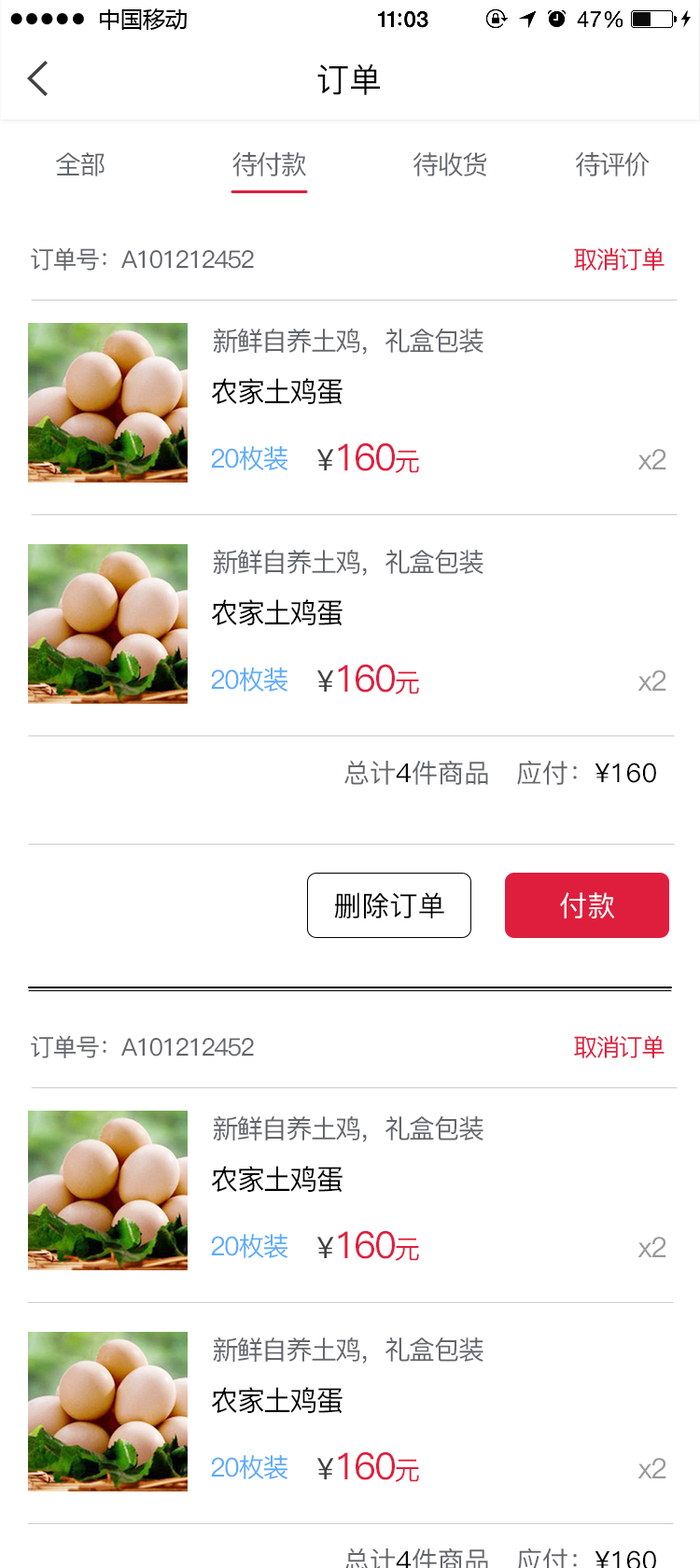
<style>
.page{position:relative;width:700px;height:1568px;background:#ffffff}
.page>*{position:absolute;margin:0}
.t1{font:33.2px "PingFang-SC-Medium";color:#000000}
.t2{font:25.8px "PingFang-SC-Medium";letter-spacing:-0.06em;color:#63666b}
.t3{font:26.1px "PingFang-SC-Medium";letter-spacing:-0.06em;color:#63666b}
.t4{font:24.3px "PingFang-SC-Medium";letter-spacing:-0.06em;color:#63666b}
.t5{font:24.3px "PingFang-SC-Medium";letter-spacing:-0.06em;color:#df1e3e}
.t6{font:28px "PingFang-SC-Medium";letter-spacing:-0.06em;color:#000000}
.t7{font:26.1px "PingFang-SC-Medium";letter-spacing:-0.06em;color:#5aabfd}
.t8{font:37.3px "PingFang-SC-Medium";letter-spacing:-0.06em;color:#df1e3e}
.t9{font:29.9px "PingFang-SC-Medium";color:#414141}
.t10{font:26.1px "PingFang-SC-Medium";letter-spacing:-0.06em;color:#df1e3e}
.t11{font:28px "PingFang-SC-Medium";letter-spacing:-0.06em;color:#999999}
.t12{font:26.1px "PingFang-SC-Medium";color:#63666b}
.t13{font:26.1px "PingFang-SC-Medium";color:#000000}
.t14{font:28px "PingFang-SC-Medium";color:#000000}
.t15{font:28px "PingFang-SC-Medium";color:#ffffff}
</style>
<div class="page">
<p class="t1" style="left:317px;top:63px;width:63px;height:32px">订单</p>
<p class="t2" style="left:56px;top:152px;width:49px;height:24px">全部</p>
<p class="t3" style="left:232px;top:152px;width:74px;height:24px">待付款</p>
<p class="t2" style="left:413px;top:152px;width:74px;height:24px">待收货</p>
<p class="t3" style="left:576px;top:152px;width:74px;height:24px">待评价</p>
<p class="t4" style="left:31px;top:247px;width:223px;height:24px">订单号：A101212452</p>
<p class="t5" style="left:574px;top:247px;width:91px;height:24px">取消订单</p>
<p class="t3" style="left:213px;top:328px;width:270px;height:27px">新鲜自养土鸡，礼盒包装</p>
<p class="t6" style="left:212px;top:378px;width:131px;height:27px">农家土鸡蛋</p>
<p class="t7" style="left:211px;top:446px;width:77px;height:24px">20枚装</p>
<p class="t8" style="left:317px;top:443px;width:102px;height:30px"><span class="t9">¥</span>160<span class="t10">元</span></p>
<p class="t11" style="left:637px;top:449px;width:29px;height:20px">x2</p>
<p class="t3" style="left:213px;top:549px;width:270px;height:27px">新鲜自养土鸡，礼盒包装</p>
<p class="t6" style="left:212px;top:599px;width:131px;height:27px">农家土鸡蛋</p>
<p class="t8" style="left:317px;top:665px;width:102px;height:29px"><span class="t9">¥</span>160<span class="t10">元</span></p>
<p class="t7" style="left:211px;top:667px;width:77px;height:25px">20枚装</p>
<p class="t11" style="left:637px;top:670px;width:29px;height:21px">x2</p>
<p class="t12" style="left:344px;top:760px;width:312px;height:25px">总计<span class="t13">4</span>件商品   应付：<span class="t13">¥160</span></p>
<p class="t14" style="left:334px;top:892px;width:110px;height:26px">删除订单</p>
<p class="t15" style="left:560px;top:892px;width:55px;height:26px">付款</p>
<p class="t4" style="left:31px;top:1035px;width:223px;height:23px">订单号：A101212452</p>
<p class="t5" style="left:574px;top:1035px;width:91px;height:23px">取消订单</p>
<p class="t3" style="left:213px;top:1115px;width:270px;height:27px">新鲜自养土鸡，礼盒包装</p>
<p class="t6" style="left:212px;top:1166px;width:131px;height:27px">农家土鸡蛋</p>
<p class="t7" style="left:211px;top:1234px;width:77px;height:24px">20枚装</p>
<p class="t8" style="left:317px;top:1231px;width:102px;height:30px"><span class="t9">¥</span>160<span class="t10">元</span></p>
<p class="t11" style="left:637px;top:1237px;width:29px;height:20px">x2</p>
<p class="t3" style="left:213px;top:1337px;width:270px;height:27px">新鲜自养土鸡，礼盒包装</p>
<p class="t6" style="left:212px;top:1387px;width:131px;height:27px">农家土鸡蛋</p>
<p class="t7" style="left:211px;top:1455px;width:77px;height:24px">20枚装</p>
<p class="t8" style="left:317px;top:1452px;width:102px;height:30px"><span class="t9">¥</span>160<span class="t10">元</span></p>
<p class="t11" style="left:637px;top:1458px;width:29px;height:20px">x2</p>
</div>
